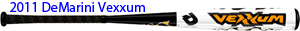
<style>
.page{position:relative;width:300px;height:31px;background:#ffffff}
.page>*{position:absolute;margin:0}
.t1{font:14px "MyriadPro-Regular";color:#0000ff}
</style>
<div class="page">
<p class="t1" style="left:10px;top:2px;width:135px;height:10px">2011 DeMarini Vexxum</p>
</div>
